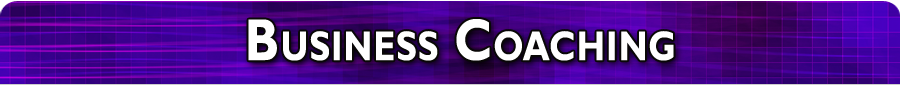
<style>
.page{position:relative;width:900px;height:85px}
.page>*{position:absolute;margin:0}
.t1{font:59.3px "GillSansMT-Bold";color:#ffffff;font-variant:small-caps;font-weight:bold;scale:0.83 1}
</style>
<div class="page">
<p class="t1" style="left:248px;top:19px;width:426px;height:42px">Business Coaching</p>
</div>
